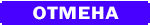
<style>
.page{position:relative;width:150px;height:25px;background:#4800ff}
.page>*{position:absolute;margin:0}
.t1{font:18.1px "FranklinGothic-Demi";letter-spacing:0.03em;color:#ffffff;scale:1.2 1}
</style>
<div class="page">
<p class="t1" style="left:33px;top:6px;width:86px;height:14px">ОТМЕНА</p>
</div>
